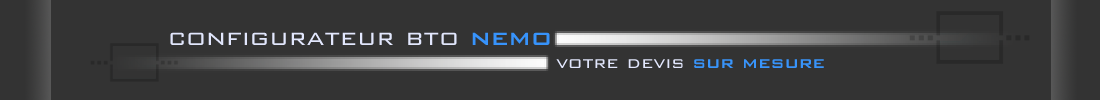
<style>
.page{position:relative;width:1100px;height:100px;background:#333333}
.page>*{position:absolute;margin:0}
.t1{font:29.2px "BankGothic-Light";color:#e2e7fd}
.t2{font:29.2px "BankGothic-Medium";color:#3793fb}
.t3{font:20.8px "BankGothic-Light";color:#e2e7fd}
.t4{font:20.8px "BankGothic-Medium";color:#3894fb}
</style>
<div class="page">
<p class="t1" style="left:170px;top:32px;width:380px;height:13px">configurateur bto <span class="t2">nemo</span></p>
<p class="t3" style="left:556px;top:59px;width:268px;height:9px">votre devis <span class="t4">sur mesure</span></p>
</div>
